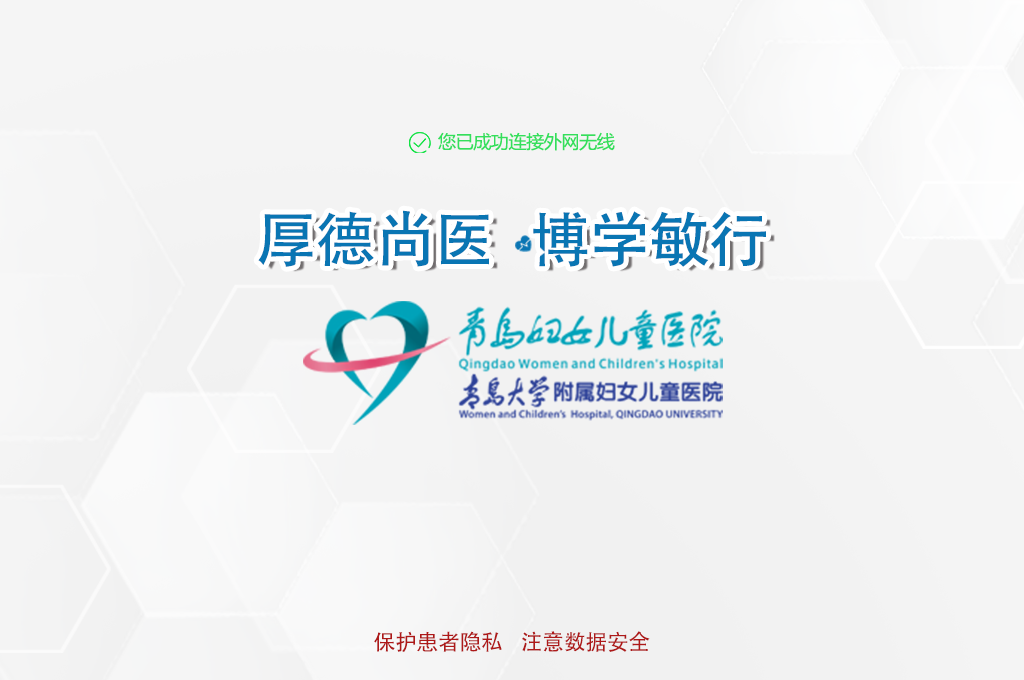
<style>
.page{position:relative;width:1024px;height:680px;background:#f4f4f4}
.page>*{position:absolute;margin:0}
.t1{font:18px "MicrosoftYaHei";letter-spacing:-0.02em;color:#33df5c}
.t2{font:60px "AdobeHeitiStd-Regular";letter-spacing:-0.02em;color:#0975b3}
.t3{font:22px "AdobeHeitiStd-Regular";letter-spacing:-0.02em;color:#ae1919}
</style>
<div class="page">
<p class="t1" style="left:438px;top:132px;width:177px;height:19px">您已成功连接外网无线</p>
<p class="t2" style="left:258px;top:210px;width:508px;height:57px">厚德尚医   博学敏行</p>
<p class="t3" style="left:374px;top:631px;width:276px;height:21px">保护患者隐私    注意数据安全</p>
</div>
